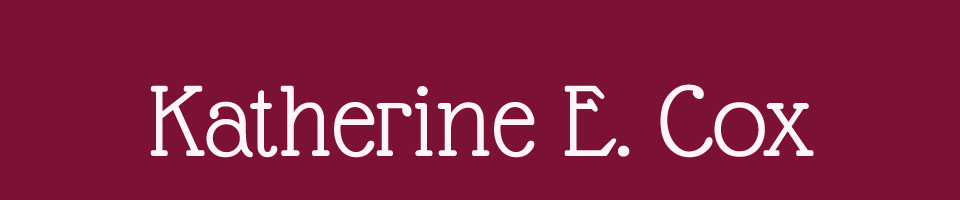
<style>
.page{position:relative;width:960px;height:200px;background:#7c1137}
.page>*{position:absolute;margin:0}
.t1{font:110px "GlassAntiqua-Regular";color:#fff4f9}
</style>
<div class="page">
<p class="t1" style="left:150px;top:84px;width:664px;height:74px">Katherine E. Cox</p>
</div>
